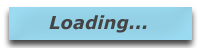
<style>
.page{position:relative;width:200px;height:48px}
.page>*{position:absolute;margin:0}
.t1{font:18px "Verdana-BoldItalic";color:#444444}
</style>
<div class="page">
<p class="t1" style="left:49px;top:15px;width:98px;height:18px">Loading...</p>
</div>
